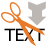
<style>
.page{position:relative;width:48px;height:48px;background:#ffffff}
.page>*{position:absolute;margin:0}
.t1{font:17px "Tahoma";color:#000000}
</style>
<div class="page">
<p class="t1" style="left:4px;top:28px;width:41px;height:13px">TEXT</p>
</div>
